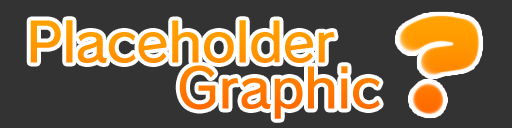
<style>
.page{position:relative;width:512px;height:128px;background:#333333}
.page>*{position:absolute;margin:0}
.t1{font:54px "RodinPro-DB";letter-spacing:-0.01em;color:#ff9800}
.t2{font:54px "RodinPro-DB";letter-spacing:-0.01em;color:#ff7600}
</style>
<div class="page">
<p class="t1" style="left:30px;top:20px;width:305px;height:43px">Placeholder</p>
<p class="t2" style="left:179px;top:65px;width:201px;height:54px">Graphic</p>
</div>
